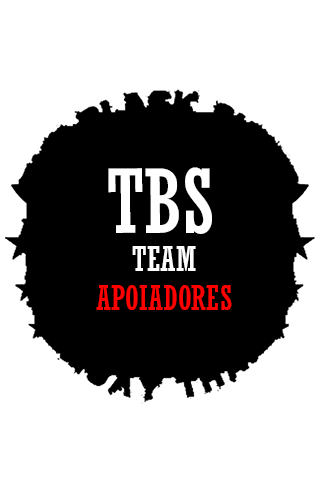
<style>
.page{position:relative;width:320px;height:490px;background:#ffffff}
.page>*{position:absolute;margin:0}
.t1{font:87.6px "Rockwell-Condensed";color:#ffffff}
.t2{font:33.7px "Rockwell-Condensed";color:#ffffff}
.t3{font:33.3px "Rockwell-Condensed";color:#ff0000}
</style>
<div class="page">
<p class="t1" style="left:108px;top:167px;width:104px;height:67px">TBS</p>
<p class="t2" style="left:132px;top:246px;width:64px;height:25px">TEAM</p>
<p class="t3" style="left:96px;top:285px;width:136px;height:25px">APOIADORES</p>
</div>
